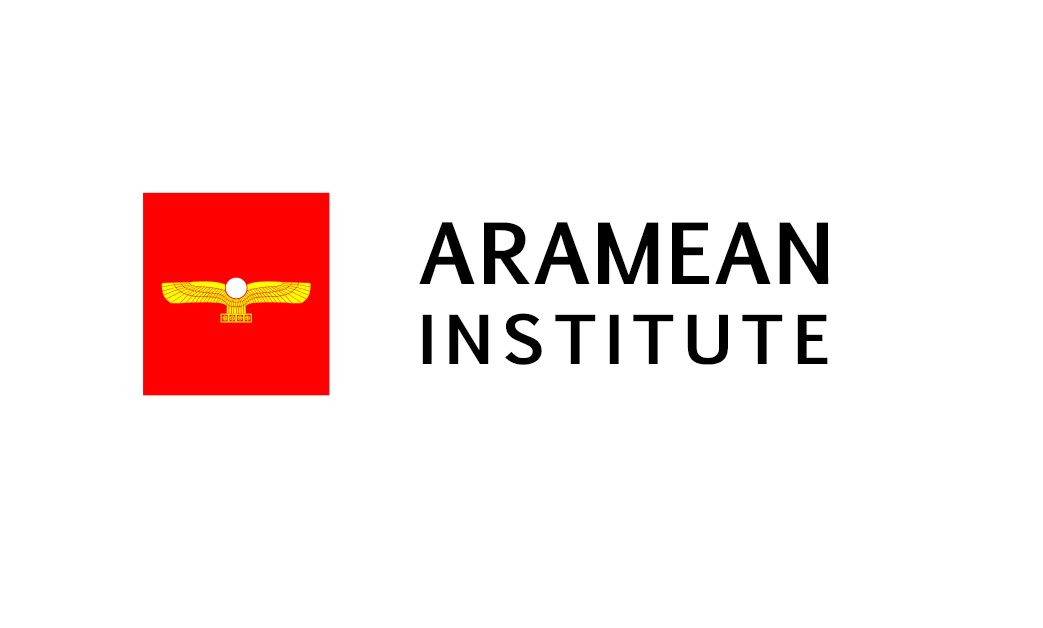
<style>
.page{position:relative;width:1043px;height:628px;background:#ffffff}
.page>*{position:absolute;margin:0}
.t1{font:80.4px "EuphemiaUCAS-Bold";letter-spacing:0.019em;color:#000000}
.t2{font:80.4px "EuphemiaUCAS-Bold";letter-spacing:0.02em;color:#000000}
.t3{font:80.4px "EuphemiaUCAS-Bold";color:#000000}
.t4{font:64.3px "EuphemiaUCAS-Bold";letter-spacing:0.13em;color:#000000}
.t5{font:64.3px "EuphemiaUCAS-Bold";letter-spacing:0.129em;color:#000000}
.t6{font:64.3px "EuphemiaUCAS-Bold";color:#000000}
</style>
<div class="page">
<p class="t1" style="left:419px;top:222px;width:410px;height:62px">A<span class="t2">R</span>AMEA<span class="t3">N</span></p>
<p class="t4" style="left:422px;top:313px;width:406px;height:52px">IN<span class="t5">S</span>TI<span class="t5">T</span>UT<span class="t6">E</span></p>
</div>
